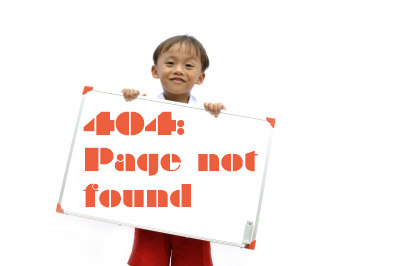
<style>
.page{position:relative;width:400px;height:266px;background:#fefefe}
.page>*{position:absolute;margin:0}
.t1{font:30px "Braggadocio";color:#ed5e3c}
</style>
<div class="page">
<p class="t1" style="left:83px;top:111px;width:175px;height:97px">404:<br>Page not<br>found</p>
</div>
